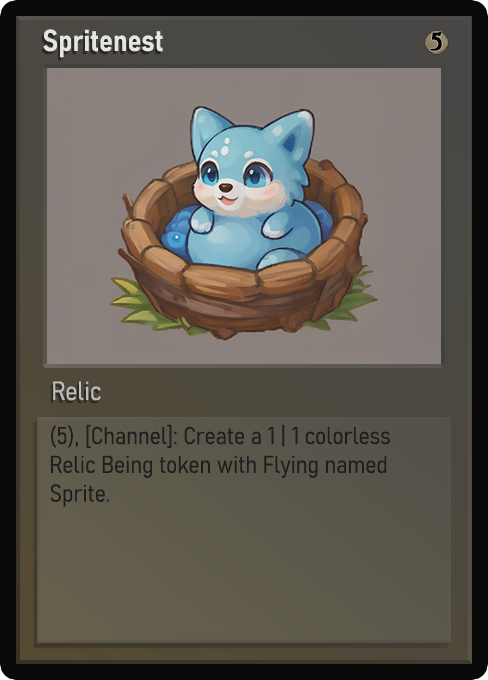
<style>
.page{position:relative;width:488px;height:680px}
.page>*{position:absolute;margin:0}
.t1{font:30px "Bahnschrift-SemiBoldSemiCondensed";color:#f2f2f2;font-weight:bold}
.t2{font:25px "WTRRoycroft";color:#000000;font-weight:bold;scale:1.09 1}
.t3{font:26px "Bahnschrift-LightSemiCondensed";color:#c8c8c8;font-weight:bold}
.t4{font:24px "Bahnschrift-LightSemiCondensed";color:#1e1e1e;font-weight:bold}
</style>
<div class="page">
<p class="t1" style="left:43px;top:29px;width:120px;height:29px;opacity:0.9">Spritenest</p>
<p class="t2" style="left:430px;top:31px;width:12px;height:20px">5</p>
<p class="t3" style="left:53px;top:381px;width:48px;height:20px;opacity:0.9">Relic</p>
<p class="t4" style="left:50px;top:424px;width:340px;height:83px">(5), [Channel]: Create a 1 | 1 colorless Relic Being token with Flying named Sprite.</p>
</div>
